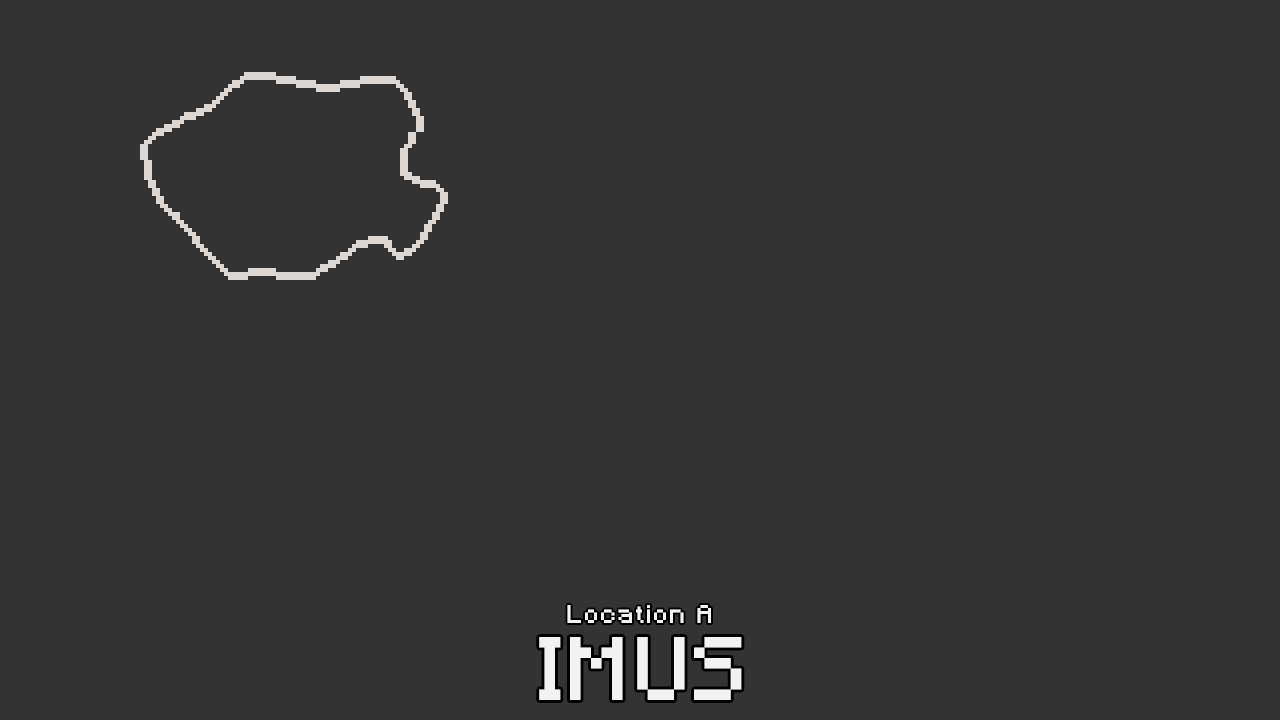
<style>
.page{position:relative;width:1280px;height:720px;background:#333333}
.page>*{position:absolute;margin:0}
.t1{font:24px "Minecraft";letter-spacing:0.1em;color:#f4f1f1}
.t2{font:84px "Minecraft";letter-spacing:0.05em;color:#f4f1f1}
</style>
<div class="page">
<p class="t1" style="left:567px;top:605px;width:144px;height:18px">Location A</p>
<p class="t2" style="left:539px;top:637px;width:203px;height:63px">IMUS</p>
</div>
